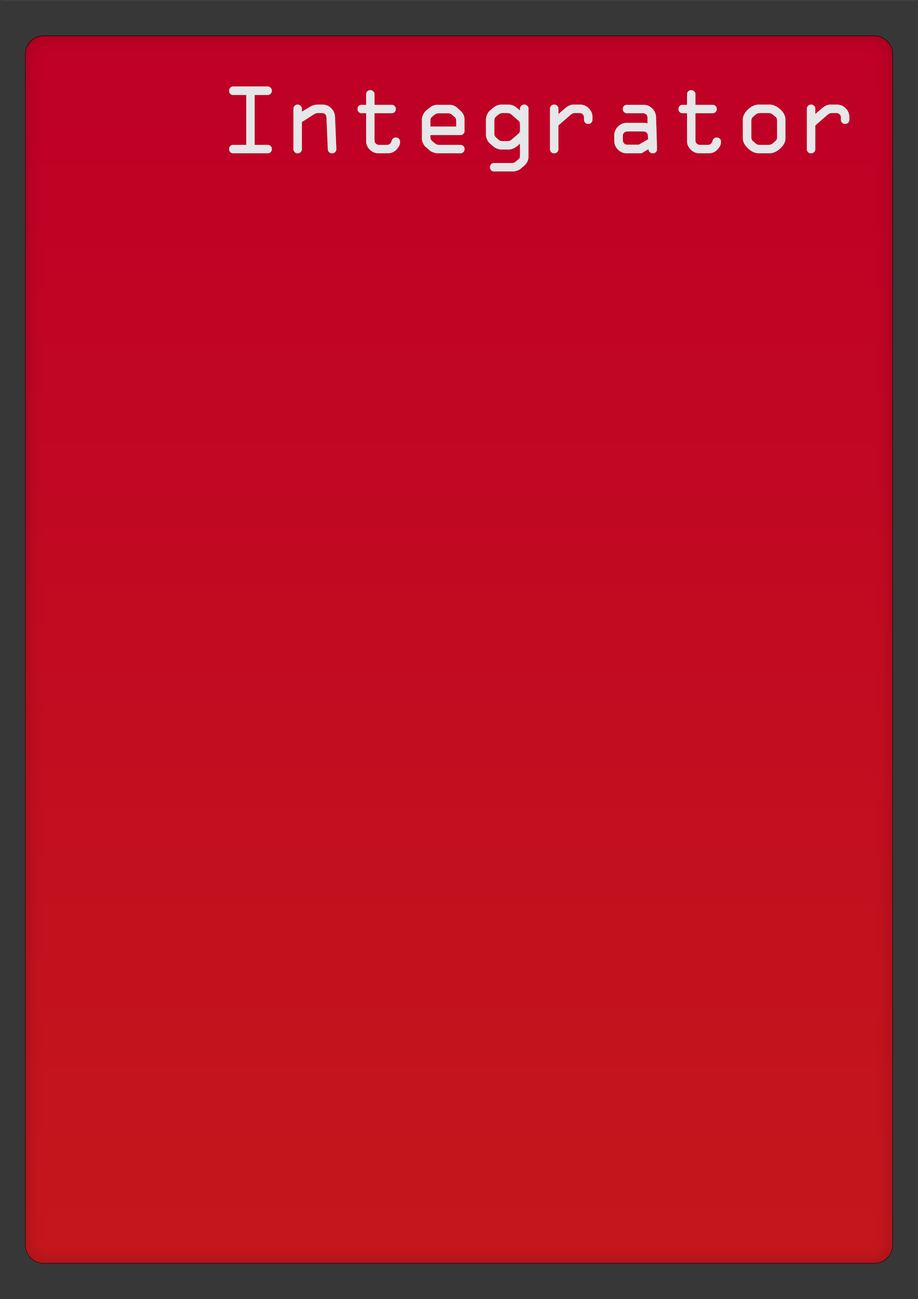
<style>
.page{position:relative;width:918px;height:1299px}
.page>*{position:absolute;margin:0}
.t1{font:103px "OCRAExtended";letter-spacing:0.02em;color:#e8e1e1}
</style>
<div class="page">
<p class="t1" style="left:229px;top:86px;width:621px;height:85px">Integrator</p>
</div>
